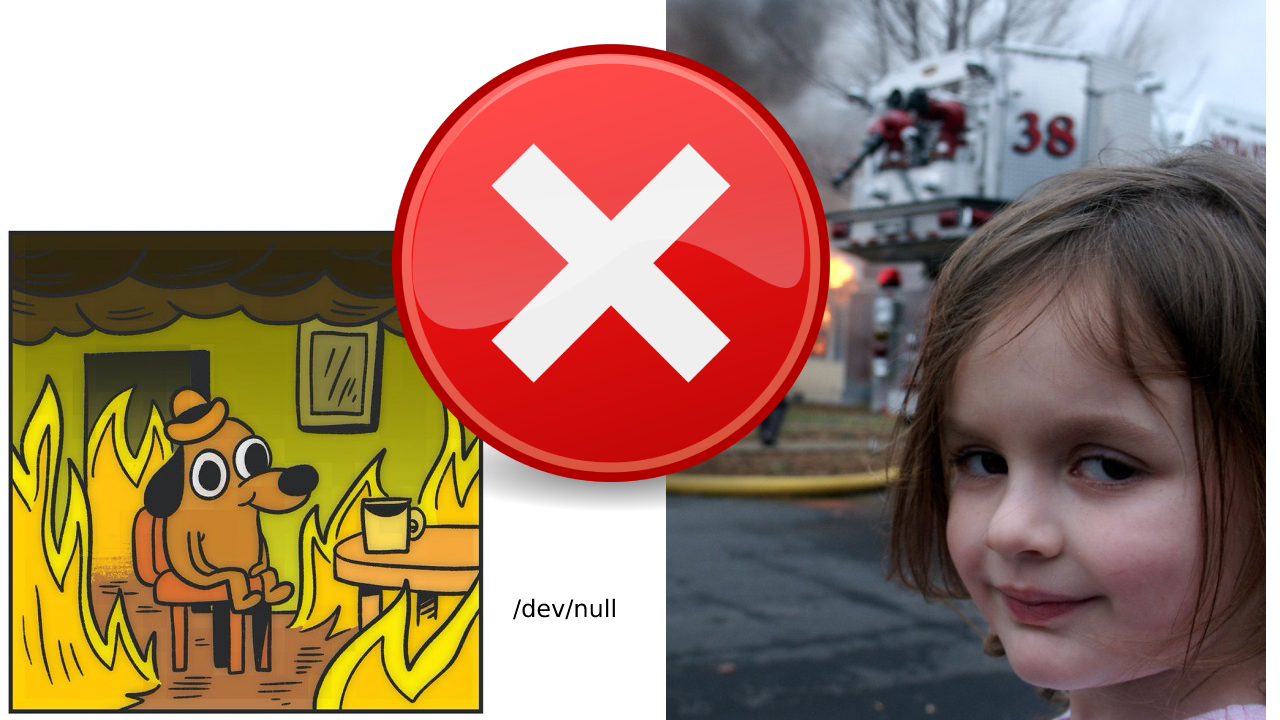
<style>
.page{position:relative;width:1280px;height:720px}
.page>*{position:absolute;margin:0}
.t1{font:24px "DejaVuSans";color:#000000}
</style>
<div class="page">
<p class="t1" style="left:513px;top:598px;width:102px;height:22px">/dev/null</p>
</div>
